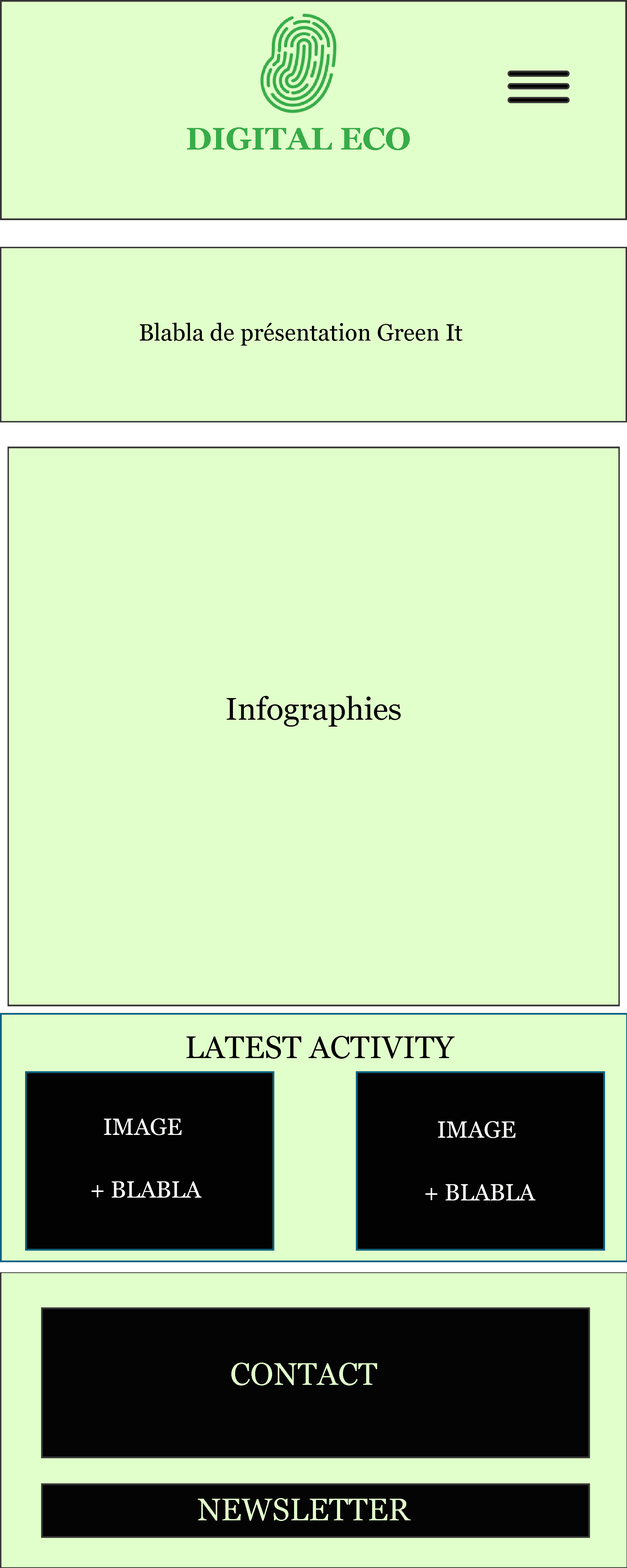
<style>
.page{position:relative;width:627px;height:1568px;background:#e1ffca}
.page>*{position:absolute;margin:0}
.t1{font:31.4px "Georgia-Bold";color:#37ac49}
.t2{font:23.5px "Georgia";color:#020202}
.t3{font:31.4px "Georgia";color:#040404}
.t4{font:31.4px "Georgia";color:#010101}
.t5{font:23.5px/62.7px "Georgia";color:#fdfdfc}
.t6{font:31.4px "Georgia";color:#e1ffca}
</style>
<div class="page">
<p class="t1" style="left:187px;top:127px;width:223px;height:23px">DIGITAL ECO</p>
<p class="t2" style="left:140px;top:323px;width:323px;height:23px">Blabla de présentation Green It</p>
<p class="t3" style="left:227px;top:696px;width:174px;height:31px">Infographies</p>
<p class="t4" style="left:186px;top:1036px;width:269px;height:23px">LATEST ACTIVITY</p>
<p class="t5" style="left:92px;top:1118px;width:110px;height:80px;text-align:center">IMAGE <br>+ BLABLA</p>
<p class="t5" style="left:426px;top:1121px;width:110px;height:79px;text-align:center">IMAGE <br>+ BLABLA</p>
<p class="t6" style="left:231px;top:1363px;width:146px;height:22px">CONTACT</p>
<p class="t6" style="left:198px;top:1498px;width:213px;height:23px">NEWSLETTER</p>
</div>
